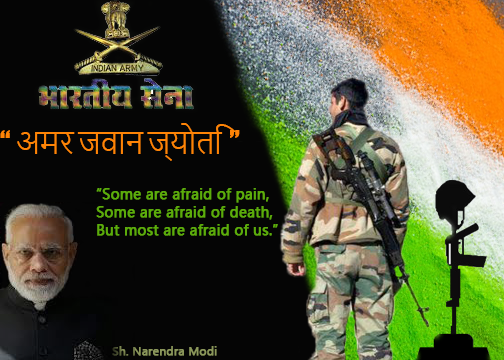
<style>
.page{position:relative;width:504px;height:360px;background:#050505}
.page>*{position:absolute;margin:0}
.t1{font:30px "NirmalaUI-Semilight";color:#fe8406}
.t2{font:30px "Impact";color:#fe8406}
.t3{font:15px "Ebrima";color:#5cac0b;font-weight:bold}
.t4{font:12px "Ebrima";color:#8b975b;font-weight:bold}
</style>
<div class="page">
<p class="t1" style="left:0px;top:123px;width:240px;height:38px"><span class="t2">“ </span>अमर जवान ज्योति <span class="t2">”</span></p>
<p class="t3" style="left:96px;top:188px;width:182px;height:48px">“Some are afraid of pain,<br>Some are afraid of death,<br>But most are afraid of us.”</p>
<p class="t4" style="left:112px;top:346px;width:105px;height:10px">Sh. Narendra Modi</p>
</div>
